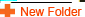
<style>
.page{position:relative;width:85px;height:17px;background:#ffffff}
.page>*{position:absolute;margin:0}
.t1{font:12px "ArialMT"}
</style>
<div class="page">
<p class="t1" style="left:21px;top:4px;width:61px;height:9px">New Folder</p>
</div>
